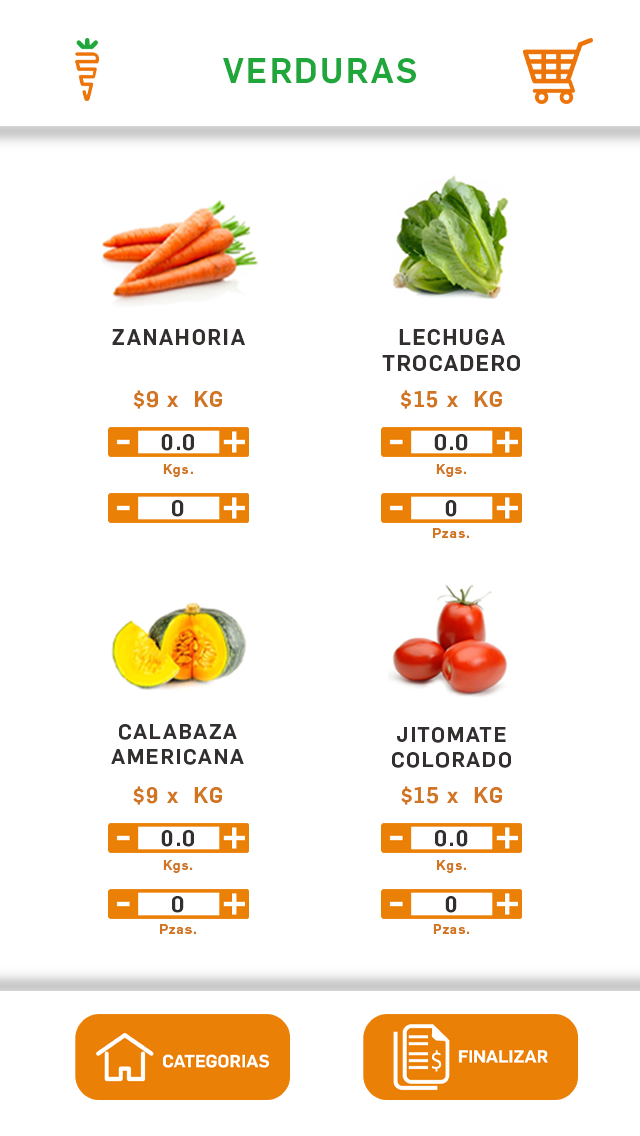
<style>
.page{position:relative;width:640px;height:1136px;background:#ffffff}
.page>*{position:absolute;margin:0}
.t1{font:34px "Flama-Medium";letter-spacing:0.075em;color:#1fa73c}
.t2{font:21.3px "Flama-Medium";letter-spacing:0.075em;color:#332f2e}
.t3{font:21.3px "Flama-Medium";letter-spacing:0.075em;color:#d27520}
.t4{font:13.6px "Flama-Medium";letter-spacing:0.075em;color:#d27520}
.t5{font:20.8px "Flama-Medium";letter-spacing:0.075em;color:#332f2e}
</style>
<div class="page">
<p class="t1" style="left:223px;top:58px;width:193px;height:26px">VERDURAS</p>
<p class="t2" style="left:112px;top:329px;width:133px;height:16px">ZANAHORIA</p>
<p class="t2" style="left:382px;top:329px;width:138px;height:42px;text-align:center">LECHUGA<br>TROCADERO</p>
<p class="t3" style="left:133px;top:390px;width:89px;height:19px">$9 x  KG</p>
<p class="t3" style="left:400px;top:390px;width:102px;height:19px">$15 x  KG</p>
<p class="t2" style="left:161px;top:434px;width:33px;height:17px">0.0</p>
<p class="t2" style="left:434px;top:434px;width:34px;height:17px">0.0</p>
<p class="t4" style="left:163px;top:464px;width:30px;height:13px">Kgs.</p>
<p class="t4" style="left:436px;top:464px;width:30px;height:13px">Kgs.</p>
<p class="t2" style="left:172px;top:500px;width:12px;height:17px">0</p>
<p class="t2" style="left:445px;top:500px;width:12px;height:17px">0</p>
<p class="t4" style="left:433px;top:528px;width:36px;height:10px">Pzas.</p>
<p class="t5" style="left:111px;top:724px;width:133px;height:41px;text-align:center">CALABAZA<br>AMERICANA</p>
<p class="t5" style="left:392px;top:727px;width:119px;height:41px;text-align:center">JITOMATE<br>COLORADO</p>
<p class="t3" style="left:133px;top:786px;width:89px;height:19px">$9 x  KG</p>
<p class="t3" style="left:401px;top:786px;width:101px;height:19px">$15 x  KG</p>
<p class="t2" style="left:161px;top:830px;width:33px;height:17px">0.0</p>
<p class="t2" style="left:435px;top:830px;width:33px;height:17px">0.0</p>
<p class="t4" style="left:163px;top:860px;width:30px;height:13px">Kgs.</p>
<p class="t4" style="left:437px;top:860px;width:29px;height:13px">Kgs.</p>
<p class="t2" style="left:172px;top:896px;width:12px;height:17px">0</p>
<p class="t2" style="left:445px;top:896px;width:12px;height:17px">0</p>
<p class="t4" style="left:160px;top:924px;width:36px;height:10px">Pzas.</p>
<p class="t4" style="left:433px;top:924px;width:37px;height:10px">Pzas.</p>
</div>
